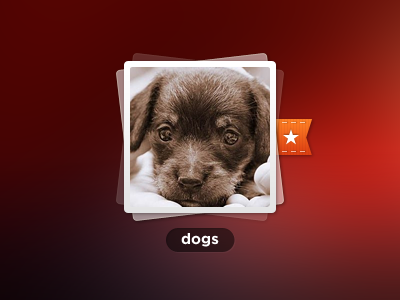
<style>
.page{position:relative;width:400px;height:300px}
.page>*{position:absolute;margin:0}
.t1{font:15px "Gotham-Bold";color:#ffffff}
</style>
<div class="page">
<p class="t1" style="left:181px;top:233px;width:38px;height:14px">dogs</p>
</div>
